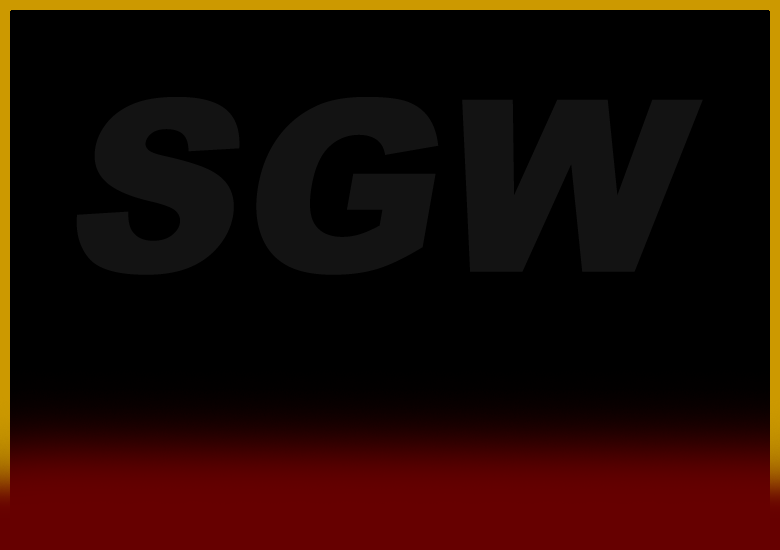
<style>
.page{position:relative;width:780px;height:550px;background:#000000}
.page>*{position:absolute;margin:0}
.t1{font:240px "Arial-Black";color:#131313;font-style:italic}
</style>
<div class="page">
<p class="t1" style="left:76px;top:97px;width:627px;height:178px">SGW</p>
</div>
